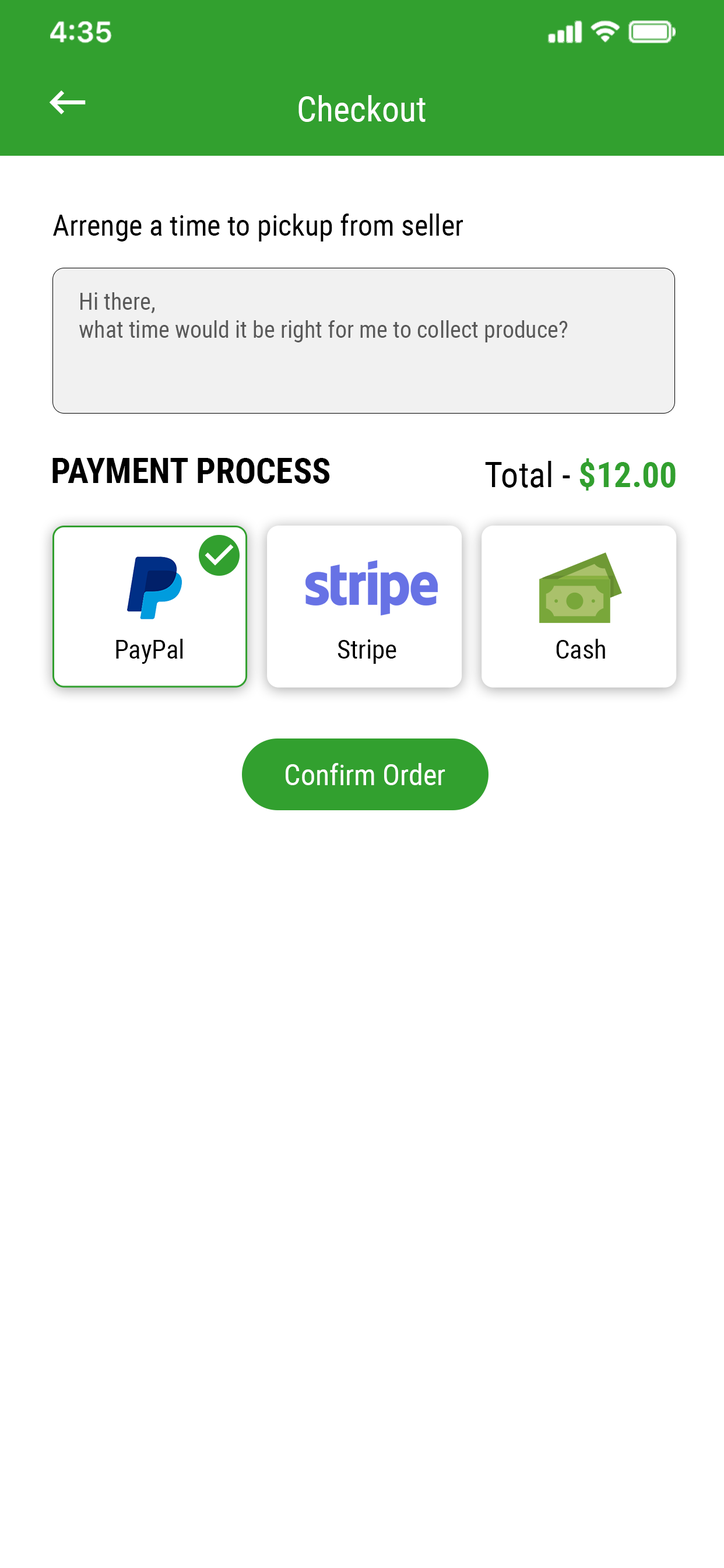
<style>
.page{position:relative;width:724px;height:1568px;background:#ffffff}
.page>*{position:absolute;margin:0}
.t1{font:35px "RobotoCondensed-Regular";color:#ffffff}
.t2{font:29.2px "RobotoCondensed-Regular";color:#000000}
.t3{font:23.3px "RobotoCondensed-Regular";color:#595959}
.t4{font:35px "RobotoCondensed-Bold";color:#000000;text-transform:uppercase}
.t5{font:35px "RobotoCondensed-Regular";color:#000000}
.t6{font:35px "RobotoCondensed-Bold";color:#32a02f}
.t7{font:26.1px "RobotoCondensed-Regular";color:#000000}
.t8{font:29.2px "RobotoCondensed-Regular";color:#fffefe}
</style>
<div class="page">
<p class="t1" style="left:299px;top:95px;width:127px;height:27px">Checkout</p>
<p class="t2" style="left:53px;top:214px;width:411px;height:28px">Arrenge a time to pickup from seller</p>
<p class="t3" style="left:79px;top:292px;width:489px;height:50px">Hi there, <br>what time would it be right for me to collect produce?</p>
<p class="t4" style="left:52px;top:458px;width:278px;height:26px">Payment Process</p>
<p class="t5" style="left:485px;top:458px;width:191px;height:33px">Total - <span class="t6">$12.00</span></p>
<p class="t7" style="left:116px;top:639px;width:67px;height:25px">PayPal</p>
<p class="t7" style="left:338px;top:639px;width:59px;height:25px">Stripe</p>
<p class="t7" style="left:556px;top:639px;width:50px;height:20px">Cash</p>
<p class="t8" style="left:286px;top:763px;width:160px;height:22px">Confirm Order</p>
</div>
